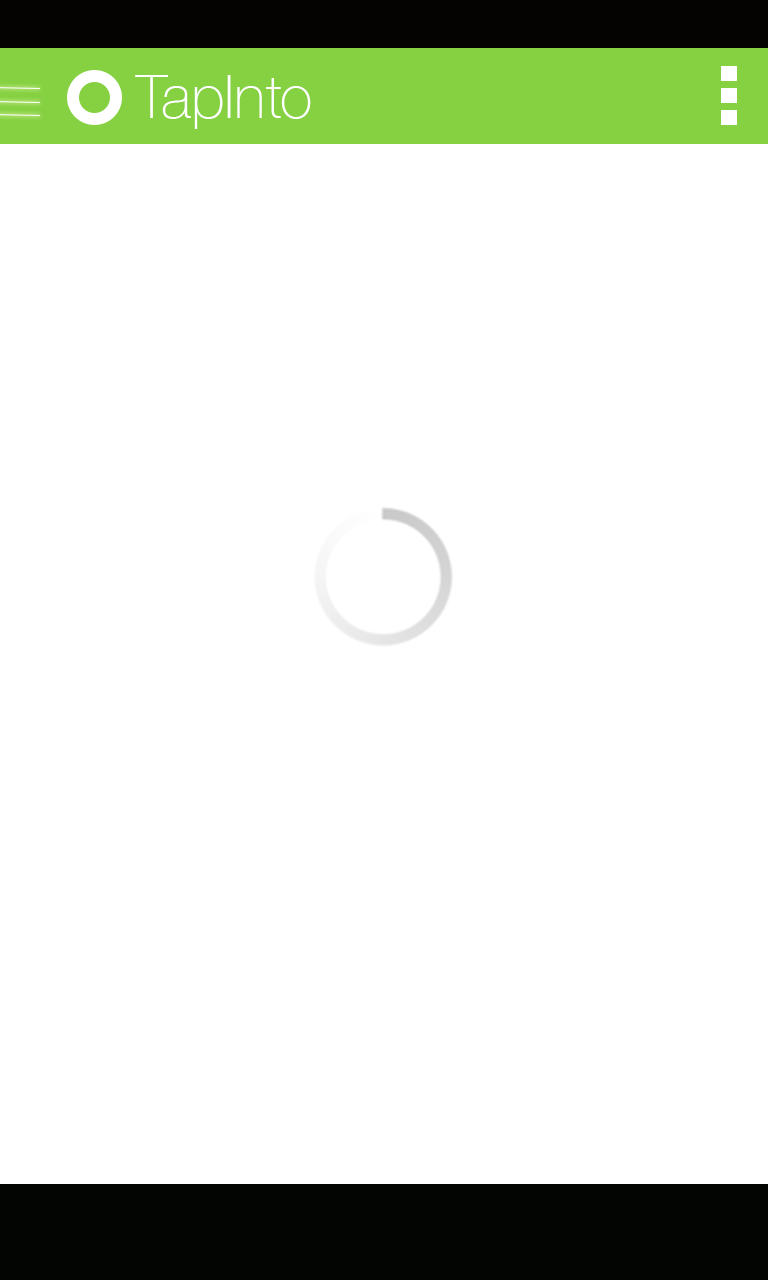
<style>
.page{position:relative;width:768px;height:1280px;background:#ffffff}
.page>*{position:absolute;margin:0}
.t1{font:60px "HelveticaNeue-Thin";color:#ffffff}
</style>
<div class="page">
<p class="t1" style="left:135px;top:75px;width:176px;height:54px">TapInto</p>
</div>
